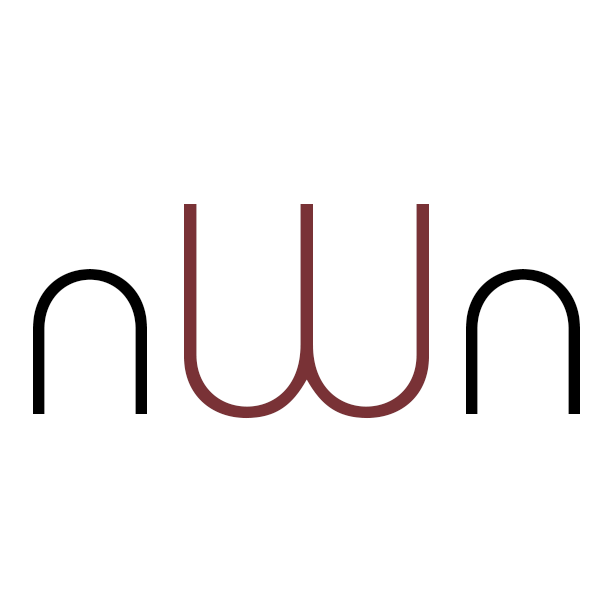
<style>
.page{position:relative;width:613px;height:613px;background:#ffffff}
.page>*{position:absolute;margin:0}
.t1{font:300px "BauhausStd-Light";color:#000000}
.t2{font:300px "BauhausStd-Light";color:#793236}
</style>
<div class="page">
<p class="t1" style="left:33px;top:204px;width:547px;height:215px">n<span class="t2">W</span>n</p>
</div>
